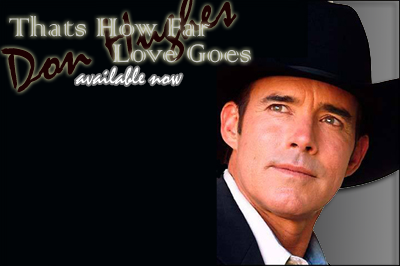
<style>
.page{position:relative;width:400px;height:266px;background:#000407}
.page>*{position:absolute;margin:0}
.t1{font:34px "ColonnaMT";color:#c9c9c9}
.t2{font:24px "Mistral";color:#ffffff}
</style>
<div class="page">
<p class="t1" style="left:9px;top:15px;width:201px;height:22px">Thats How Far</p>
<p class="t1" style="left:112px;top:44px;width:139px;height:19px">Love Goes</p>
<p class="t2" style="left:76px;top:67px;width:106px;height:18px">available now</p>
</div>
